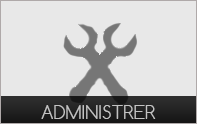
<style>
.page{position:relative;width:197px;height:124px;background:#e8e8e8}
.page>*{position:absolute;margin:0}
.t1{font:18px "Comfortaa-Light";color:#c3c3c3}
</style>
<div class="page">
<p class="t1" style="left:41px;top:105px;width:115px;height:14px">ADMINISTRER</p>
</div>
